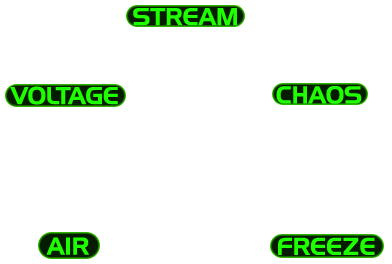
<style>
.page{position:relative;width:392px;height:264px;background:#ffffff}
.page>*{position:absolute;margin:0}
.t1{font:23.7px "HandelGothicBT-Regular";color:#1eff00}
</style>
<div class="page">
<p class="t1" style="left:133px;top:8px;width:104px;height:18px">STREAM</p>
<p class="t1" style="left:10px;top:86px;width:108px;height:19px">VOLTAGE</p>
<p class="t1" style="left:276px;top:86px;width:86px;height:18px">CHAOS</p>
<p class="t1" style="left:46px;top:237px;width:43px;height:18px">AIR</p>
<p class="t1" style="left:278px;top:237px;width:97px;height:18px">FREEZE</p>
</div>
